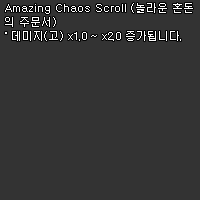
<style>
.page{position:relative;width:200px;height:200px;background:#333333}
.page>*{position:absolute;margin:0}
.t1{font:11px/14px "Dotum";color:#ffffff}
</style>
<div class="page">
<p class="t1" style="left:5px;top:3px;width:188px;height:38px">Amazing Chaos Scroll (놀라운 혼돈<br>의 주문서)<br>˚ 데미지(고) x1.0 ~ x2.0 증가됩니다.</p>
</div>
